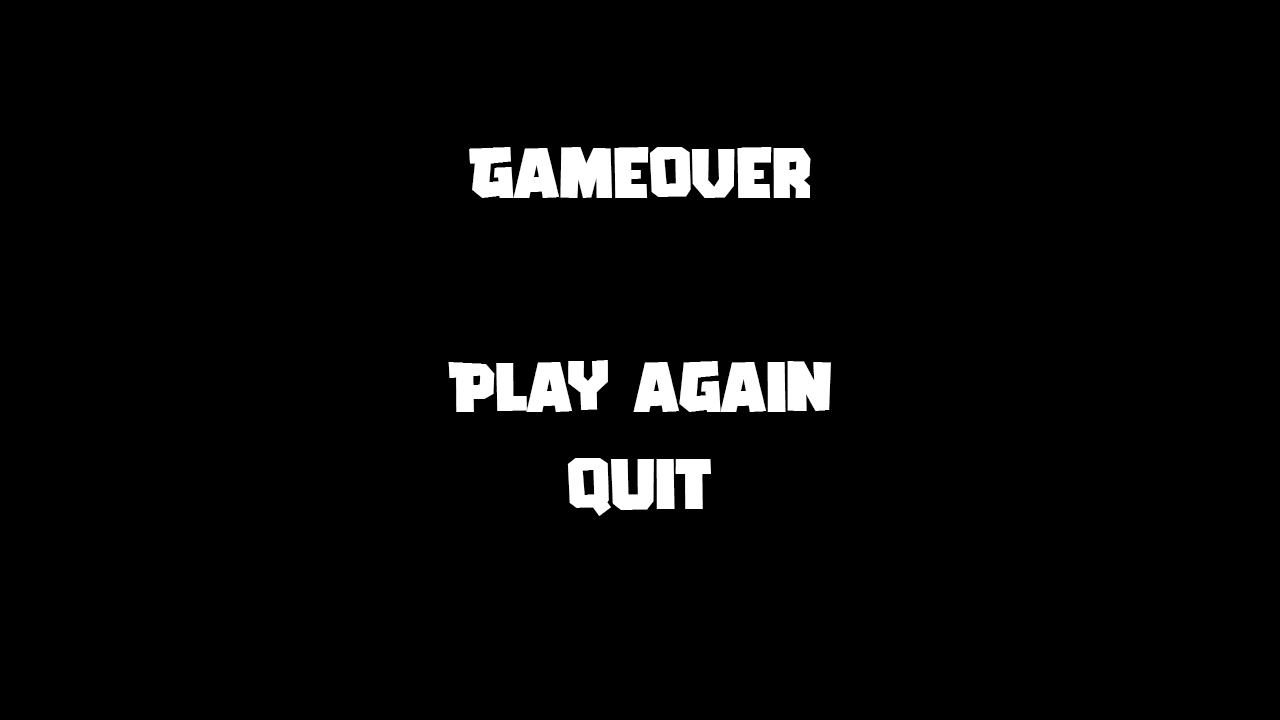
<style>
.page{position:relative;width:1280px;height:720px;background:#000000}
.page>*{position:absolute;margin:0}
.t1{font:72px "GAMERIA";color:#ffffff}
</style>
<div class="page">
<p class="t1" style="left:469px;top:147px;width:342px;height:51px">GameOver</p>
<p class="t1" style="left:448px;top:360px;width:383px;height:52px">Play again</p>
<p class="t1" style="left:567px;top:458px;width:144px;height:58px">quit</p>
</div>
